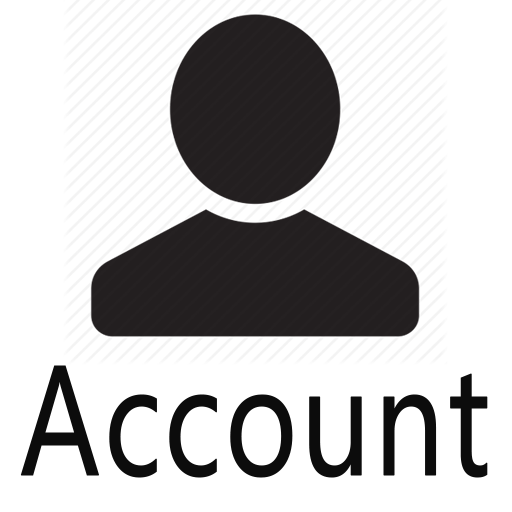
<style>
.page{position:relative;width:512px;height:512px;background:#ffffff}
.page>*{position:absolute;margin:0}
.t1{font:156.3px "Gadugi";color:#0c0c0c;font-weight:bold;scale:0.79 1}
</style>
<div class="page">
<p class="t1" style="left:20px;top:365px;width:468px;height:113px">Account</p>
</div>
